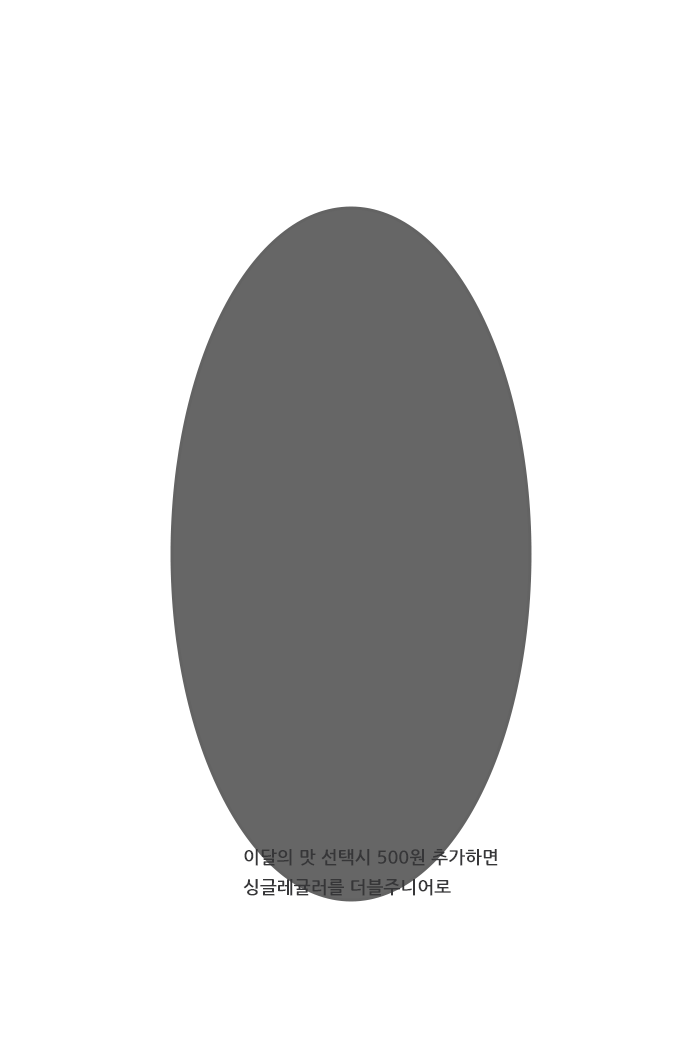
<style>
.page{position:relative;width:700px;height:1050px;background:#ffffff}
.page>*{position:absolute;margin:0}
.t1{font:18px/30px "NanumGothicBold";color:#363638}
</style>
<div class="page">
<p class="t1" style="left:243px;top:849px;width:255px;height:47px">이달의 맛 선택시 500원 추가하면<br>싱글레귤러를 더블주니어로</p>
</div>
